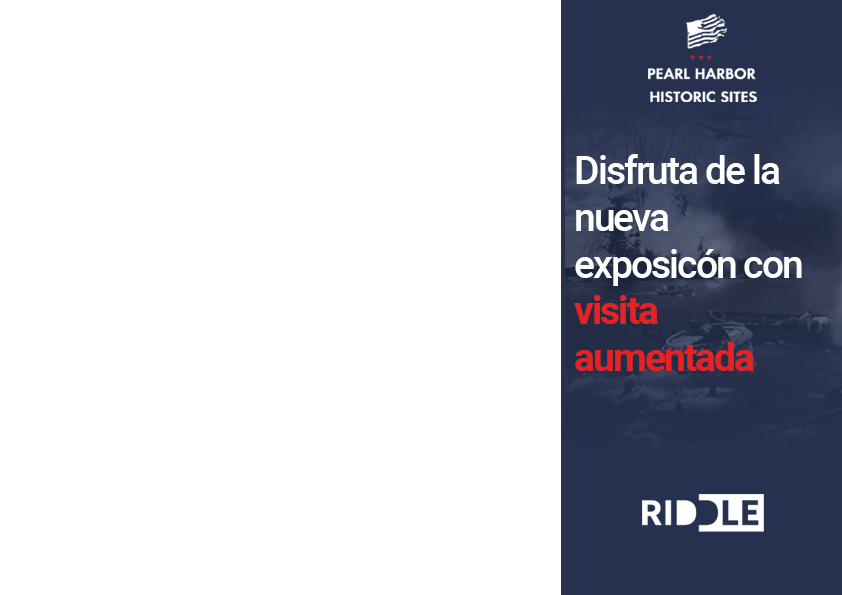
<style>
.page{position:relative;width:842px;height:595px;background:#ffffff}
.page>*{position:absolute;margin:0}
.t1{font:39px "Roboto-Medium";letter-spacing:-0.05em;color:#ffffff}
.t2{font:39px "Roboto-Bold";letter-spacing:-0.05em;color:#e62323}
</style>
<div class="page">
<p class="t1" style="left:574px;top:154px;width:228px;height:217px">Disfruta de la<br>nueva <br>exposicón con <br><span class="t2">visita <br>aumentada</span></p>
</div>
